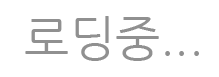
<style>
.page{position:relative;width:219px;height:77px;background:#ffffff}
.page>*{position:absolute;margin:0}
.t1{font:48px "NanumGothic";color:#909090}
</style>
<div class="page">
<p class="t1" style="left:25px;top:16px;width:174px;height:45px">로딩중...</p>
</div>
